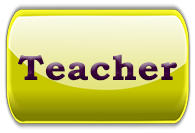
<style>
.page{position:relative;width:195px;height:133px}
.page>*{position:absolute;margin:0}
.t1{font:34.9px "BookmanOldStyle-Bold";letter-spacing:0.02em;color:#3a033b;scale:1.07 1}
</style>
<div class="page">
<p class="t1" style="left:17px;top:54px;width:160px;height:27px">Teacher</p>
</div>
